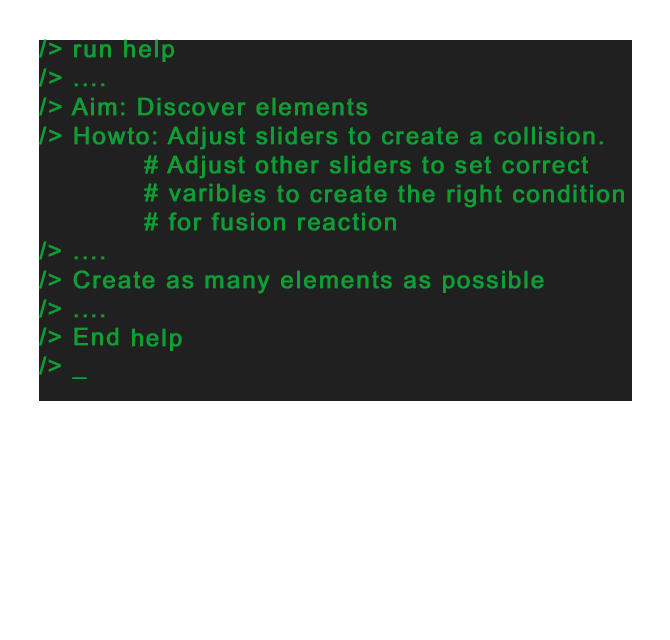
<style>
.page{position:relative;width:670px;height:640px;background:#ffffff}
.page>*{position:absolute;margin:0}
.t1{font:24px "ArialMT";letter-spacing:0.06em;color:#0d9e36;font-weight:bold}
</style>
<div class="page">
<p class="t1" style="left:39px;top:39px;width:585px;height:340px">/&gt; run help<br>/&gt; .... <br>/&gt; Aim: Discover elements<br>/&gt; Howto: Adjust sliders to create a collision.<br>            # Adjust other sliders to set correct<br>            # varibles to create the right condition<br>            # for fusion reaction<br>/&gt; ....<br>/&gt; Create as many elements as possible<br>/&gt; ....<br>/&gt; End help<br>/&gt; _</p>
</div>
